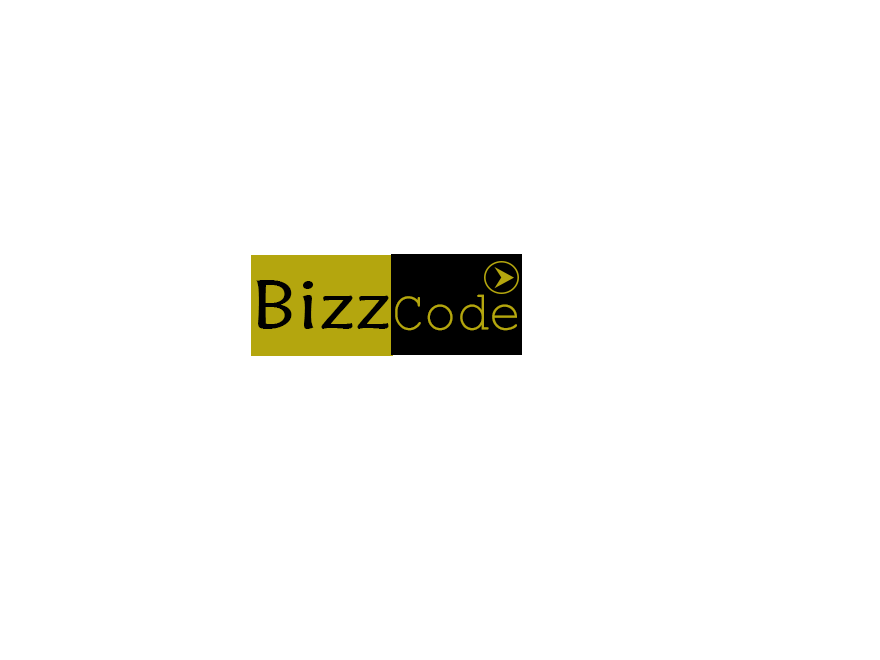
<style>
.page{position:relative;width:880px;height:660px;background:#ffffff}
.page>*{position:absolute;margin:0}
.t1{font:68.7px "MaiandraGD-Regular";color:#000000;scale:1.17 1}
.t2{font:56.7px "SimplifiedArabicFixed";color:#b4a60e;scale:0.95 1}
</style>
<div class="page">
<p class="t1" style="left:256px;top:280px;width:133px;height:49px">Bizz</p>
<p class="t2" style="left:395px;top:294px;width:122px;height:37px">Code</p>
</div>
